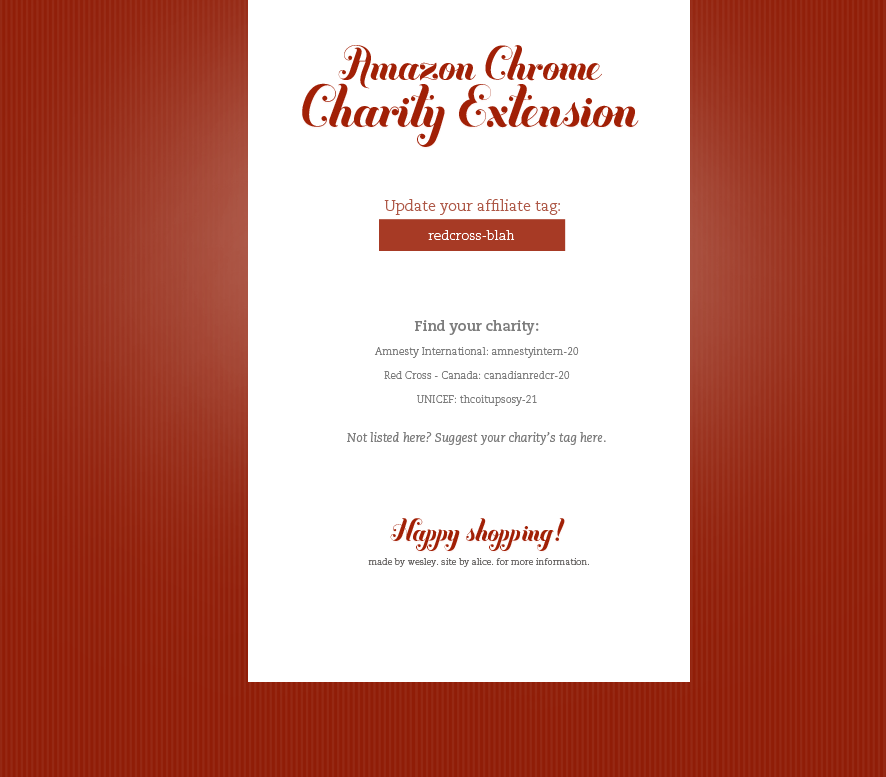
<style>
.page{position:relative;width:886px;height:777px;background:#ffffff}
.page>*{position:absolute;margin:0}
.t1{font:49.5px "Buttermilk";color:#a12006}
.t2{font:61.5px "Buttermilk";color:#a12006}
.t3{font:14.8px "CaeciliaLTStd-Light";color:#ae5847}
.t4{font:13.1px "CaeciliaLTStd-Light";color:#ffffff}
.t5{font:10.1px "CaeciliaLTStd-Light";color:#7d7d7d}
.t6{font:14.1px "CaeciliaLTStd-Bold";color:#7d7d7d}
.t7{font:12.1px "CaeciliaLTStd-Italic";color:#7d7d7d}
.t8{font:32.4px "Buttermilk";color:#a12006}
.t9{font:8.9px "CaeciliaLTStd-Light";color:#686564}
</style>
<div class="page">
<p class="t1" style="left:338px;top:45px;width:264px;height:44px">Amazon Chrome</p>
<p class="t2" style="left:302px;top:83px;width:337px;height:64px">Charity Extension</p>
<p class="t3" style="left:384px;top:199px;width:176px;height:16px">Update your affiliate tag:</p>
<p class="t4" style="left:428px;top:230px;width:87px;height:10px">redcross-blah</p>
<p class="t5" style="left:347px;top:320px;width:259px;height:125px;text-align:center"><span class="t6">Find your charity:<br></span> <br>Amnesty International: amnestyintern-20<br><br>Red Cross - Canada: canadianredcr-20<br><br>UNICEF: thcoitupsosy-21<br><br><br><span class="t7">Not listed here? Suggest your charity’s tag here.</span></p>
<p class="t8" style="left:390px;top:518px;width:175px;height:33px">Happy shopping!</p>
<p class="t9" style="left:368px;top:558px;width:221px;height:9px">made by wesley. site by alice. for more information.</p>
</div>
